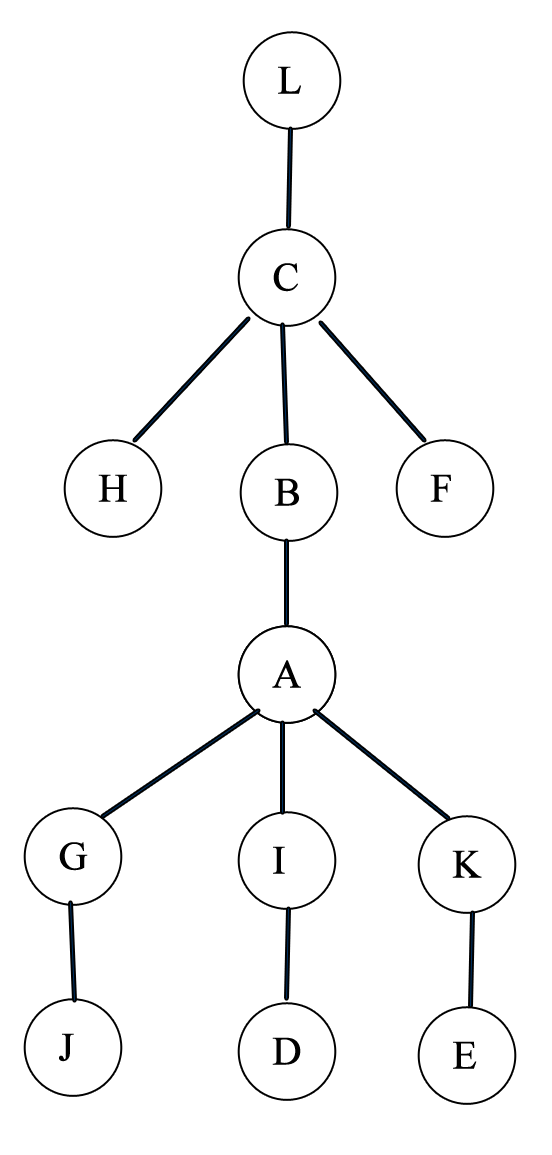
<style>
.page{position:relative;width:552px;height:1155px;background:#ffffff}
.page>*{position:absolute;margin:0}
.t1{font:40px "TimesNewRomanPSMT";color:#000000;font-weight:bold}
</style>
<div class="page">
<p class="t1" style="left:278px;top:66px;width:23px;height:28px">L</p>
<p class="t1" style="left:273px;top:263px;width:25px;height:29px">C</p>
<p class="t1" style="left:98px;top:474px;width:29px;height:28px">H</p>
<p class="t1" style="left:274px;top:478px;width:25px;height:28px">B</p>
<p class="t1" style="left:430px;top:474px;width:21px;height:28px">F</p>
<p class="t1" style="left:272px;top:660px;width:29px;height:28px">A</p>
<p class="t1" style="left:59px;top:842px;width:29px;height:29px">G</p>
<p class="t1" style="left:273px;top:846px;width:12px;height:28px">I</p>
<p class="t1" style="left:452px;top:850px;width:30px;height:28px">K</p>
<p class="t1" style="left:59px;top:1033px;width:15px;height:29px">J</p>
<p class="t1" style="left:272px;top:1037px;width:29px;height:28px">D</p>
<p class="t1" style="left:453px;top:1041px;width:24px;height:28px">E</p>
</div>
